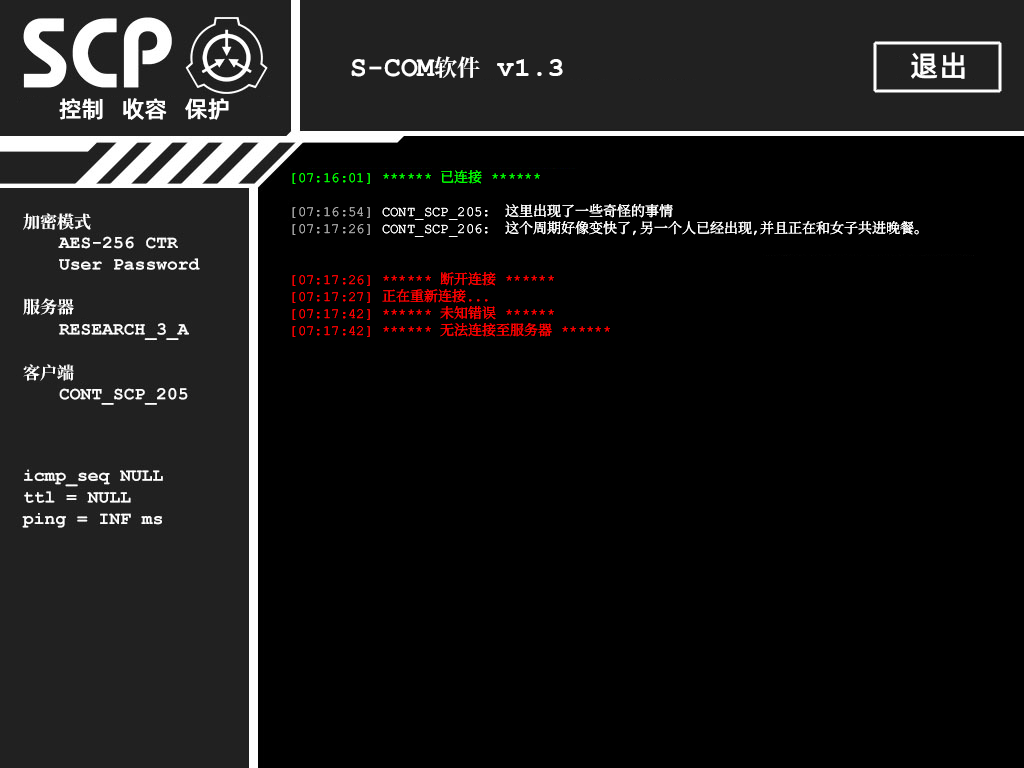
<style>
.page{position:relative;width:1024px;height:768px;background:#000000}
.page>*{position:absolute;margin:0}
.t1{font:29px "AlibabaPuHuiTiM";color:#ffffff}
.t2{font:28px "ContainmentBreach-Bold";color:#ffffff}
.t3{font:23px "ContainmentBreach-Bold";color:#ffffff}
.t4{font:28px "CourierNewPS-BoldMT";color:#ffffff}
.t5{font:23px "AlibabaPuHuiTiM";color:#ffffff}
.t6{font:14px/17px "ContainmentBreach-Regular";color:#ff0000}
.t7{font:14px/17px "ContainmentBreach-Regular";color:#00ff00}
.t8{font:14px/17px "ContainmentBreach-Regular";color:#a7a7a7}
.t9{font:14px/17px "ContainmentBreach-Regular";color:#ffffff}
.t10{font:17px/17px "ContainmentBreach-Bold";color:#ffffff}
.t11{font:17px/15px "ContainmentBreach-Bold";color:#ffffff}
</style>
<div class="page">
<p class="t1" style="left:911px;top:52px;width:54px;height:27px">退出</p>
<p class="t2" style="left:351px;top:56px;width:212px;height:22px">S-COM<span class="t3">软件 </span><span class="t4">v1.3</span></p>
<p class="t5" style="left:59px;top:98px;width:170px;height:22px">控制   收容   保护</p>
<p class="t6" style="left:292px;top:170px;width:627px;height:167px"><span class="t7">[07:16:01] ****** 已连接 ******<br><br></span><span class="t8">[07:16:54]</span><span class="t9"> CONT_SCP_205: 这里出现了一些奇怪的事情<br></span><span class="t8">[07:17:26]</span><span class="t9"> CONT_SCP_206: 这个周期好像变快了，另一个人已经出现，并且正在和女子共进晚餐。<br><br><br></span>【07:17：26】 ****** 断开连接 ******<br>[07:17:27] 正在重新连接...<br>[07:17:42] ****** 未知错误 ******<br>[07:17:42] ****** 无法连接至服务器 ******</p>
<p class="t10" style="left:23px;top:213px;width:68px;height:168px">加密模式<br><br><br><br><br>服务器<br><br><br><span class="t11"><br>客户端</span></p>
</div>
